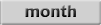
<style>
.page{position:relative;width:101px;height:25px;background:#d0d0d0}
.page>*{position:absolute;margin:0}
.t1{font:16px "CharcoalCY"}
</style>
<div class="page">
<p class="t1" style="left:25px;top:5px;width:51px;height:12px">month</p>
</div>
